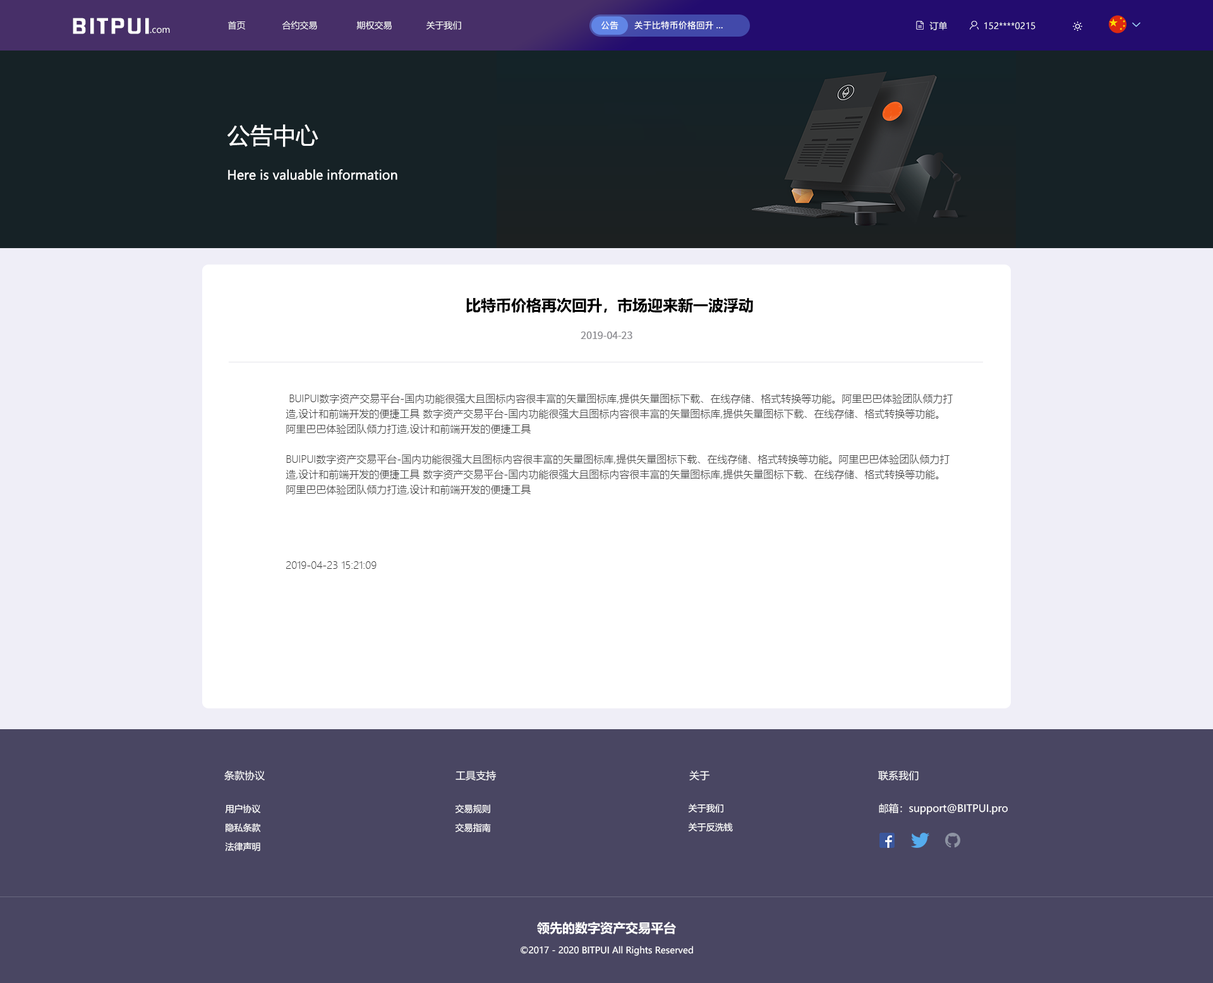
<style>
.page{position:relative;width:1213px;height:983px;background:#ffffff}
.page>*{position:absolute;margin:0}
.t1{font:19.4px "FZHZGBJW--GB1-0";letter-spacing:0.1em;color:#ffffff;scale:1.14 1}
.t2{font:8.8px "MicrosoftYaHei";color:#ffffff}
.t3{font:8.8px "PingFang-SC-Bold";color:#ffffff}
.t4{font:22.7px "MicrosoftYaHei";color:#ffffff}
.t5{font:12.6px "MicrosoftYaHei";color:#ffffff}
.t6{font:15.2px "MicrosoftYaHei-Bold";color:#000000}
.t7{font:10.1px "SourceHanSansCN-Regular";color:#8e8e93}
.t8{font:10.1px/15.2px "MicrosoftYaHeiLight";color:#333333}
.t9{font:10.1px/27.2px "MicrosoftYaHeiLight";color:#333333}
.t10{font:10.1px "MicrosoftYaHei";color:#ffffff}
.t11{font:8.8px/18.9px "MicrosoftYaHei";color:#ffffff}
.t12{font:12.6px "MicrosoftYaHei-Bold";color:#ffffff}
</style>
<div class="page">
<p class="t1" style="left:73px;top:18px;width:76px;height:16px">BITPUI</p>
<p class="t2" style="left:150px;top:28px;width:20px;height:5px">.com</p>
<p class="t2" style="left:228px;top:21px;width:233px;height:9px">首页              合约交易               期权交易             关于我们</p>
<p class="t3" style="left:601px;top:21px;width:17px;height:9px">公告</p>
<p class="t3" style="left:634px;top:21px;width:89px;height:9px">关于比特币价格回升...</p>
<p class="t2" style="left:929px;top:21px;width:18px;height:9px">订单</p>
<p class="t2" style="left:984px;top:22px;width:51px;height:8px">152****0215</p>
<p class="t4" style="left:227px;top:124px;width:91px;height:23px">公告中心</p>
<p class="t5" style="left:228px;top:169px;width:169px;height:11px">Here is valuable information</p>
<p class="t6" style="left:466px;top:298px;width:287px;height:15px">比特币价格再次回升，市场迎来新一波浮动</p>
<p class="t7" style="left:580px;top:332px;width:52px;height:7px">2019-04-23</p>
<p class="t8" style="left:285px;top:394px;width:667px;height:175px">BUIPUI数字资产交易平台-国内功能很强大且图标内容很丰富的矢量图标库,提供矢量图标下载、在线存储、格式转换等功能。阿里巴巴体验团队倾力打造,设计和前端开发的便捷工具 数字资产交易平台-国内功能很强大且图标内容很丰富的矢量图标库,提供矢量图标下载、在线存储、格式转换等功能。  阿里巴巴体验团队倾力打造,设计和前端开发的便捷工具<br><br>BUIPUI数字资产交易平台-国内功能很强大且图标内容很丰富的矢量图标库,提供矢量图标下载、在线存储、格式转换等功能。阿里巴巴体验团队倾力打造,设计和前端开发的便捷工具 数字资产交易平台-国内功能很强大且图标内容很丰富的矢量图标库,提供矢量图标下载、在线存储、格式转换等功能。  阿里巴巴体验团队倾力打造,设计和前端开发的便捷工具<br><br><br><br><br><span class="t9">2019-04-23 15:21:09</span></p>
<p class="t10" style="left:224px;top:771px;width:41px;height:10px">条款协议</p>
<p class="t10" style="left:455px;top:771px;width:41px;height:10px">工具支持</p>
<p class="t10" style="left:689px;top:771px;width:21px;height:10px">关于</p>
<p class="t10" style="left:878px;top:771px;width:40px;height:10px">联系我们</p>
<p class="t11" style="left:225px;top:805px;width:36px;height:46px;text-align:center">用户协议<br>隐私条款<br>法律声明</p>
<p class="t11" style="left:455px;top:805px;width:36px;height:27px">交易规则<br>交易指南</p>
<p class="t11" style="left:688px;top:804px;width:45px;height:28px">关于我们<br>关于反洗钱</p>
<p class="t10" style="left:879px;top:803px;width:128px;height:12px">邮箱：support@BITPUI.pro</p>
<p class="t12" style="left:537px;top:922px;width:139px;height:13px">领先的数字资产交易平台</p>
<p class="t2" style="left:520px;top:946px;width:173px;height:10px">©2017 - 2020 BITPUI All Rights Reserved</p>
</div>
